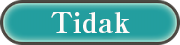
<style>
.page{position:relative;width:180px;height:45px}
.page>*{position:absolute;margin:0}
.t1{font:28px "RyuminPro-ExBold";color:#fdfbf9}
</style>
<div class="page">
<p class="t1" style="left:51px;top:12px;width:79px;height:21px">Tidak</p>
</div>
